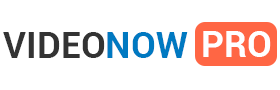
<style>
.page{position:relative;width:280px;height:90px;background:#ffffff}
.page>*{position:absolute;margin:0}
.t1{font:36px "Roboto-Bold";color:#333333}
.t2{font:36px "Roboto-Bold";color:#0079c1}
.t3{font:36px "Roboto-Bold";color:#ffffff}
</style>
<div class="page">
<p class="t1" style="left:3px;top:32px;width:185px;height:26px">VIDEO<span class="t2">NOW</span></p>
<p class="t3" style="left:203px;top:31px;width:68px;height:26px">PRO</p>
</div>
